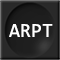
<style>
.page{position:relative;width:60px;height:60px}
.page>*{position:absolute;margin:0}
.t1{font:20px "Consolas";color:#ffffff}
</style>
<div class="page">
<p class="t1" style="left:9px;top:24px;width:44px;height:13px">ARPT</p>
</div>
